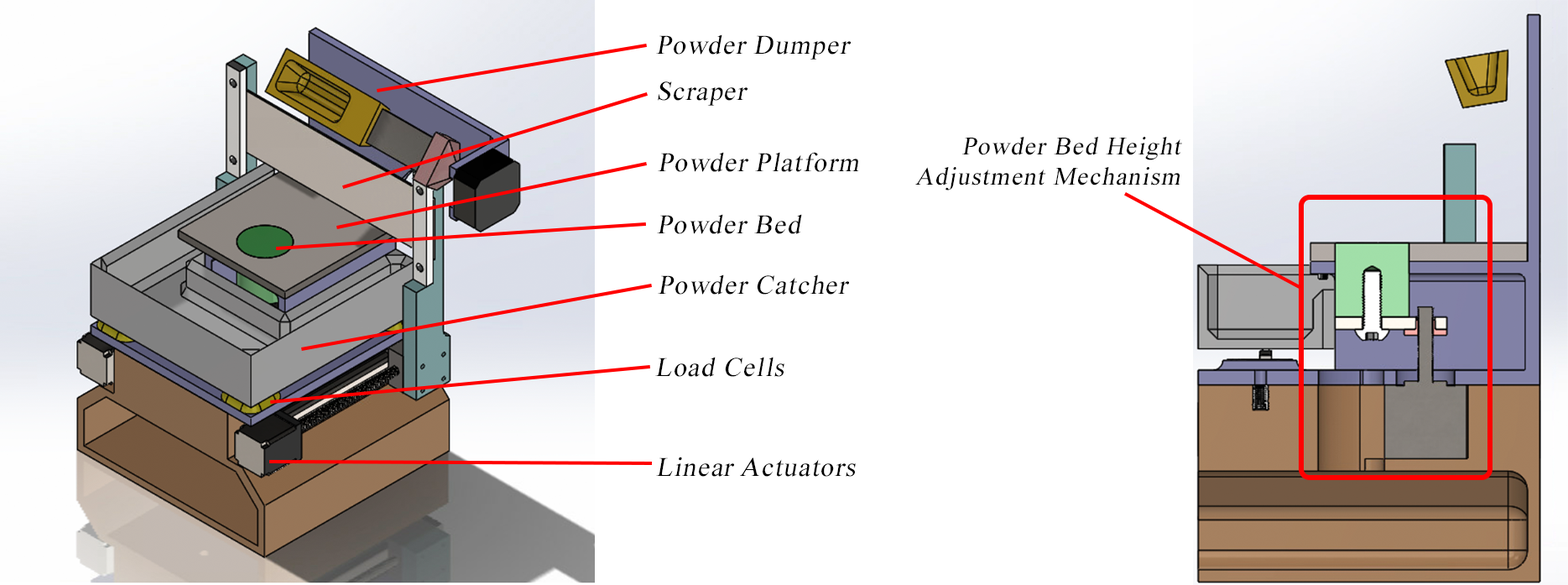
<style>
.page{position:relative;width:1568px;height:585px;background:#ffffff}
.page>*{position:absolute;margin:0}
.t1{font:26.8px "TimesNewRomanPSMT";letter-spacing:0.05em;color:#000000;font-style:italic}
.t2{font:25.2px "TimesNewRomanPSMT";letter-spacing:0.05em;color:#000000;font-style:italic}
</style>
<div class="page">
<p class="t1" style="left:656px;top:34px;width:195px;height:26px">Powder Dumper</p>
<p class="t1" style="left:658px;top:81px;width:90px;height:25px">Scraper</p>
<p class="t2" style="left:915px;top:137px;width:267px;height:53px;text-align:right">Powder Bed Height<br>Adjustment Mechanism</p>
<p class="t1" style="left:658px;top:152px;width:201px;height:20px">Powder Platform</p>
<p class="t1" style="left:657px;top:214px;width:145px;height:20px">Powder Bed</p>
<p class="t1" style="left:658px;top:274px;width:191px;height:20px">Powder Catcher</p>
<p class="t1" style="left:655px;top:357px;width:129px;height:20px">Load Cells</p>
<p class="t1" style="left:656px;top:456px;width:200px;height:21px">Linear Actuators</p>
</div>
